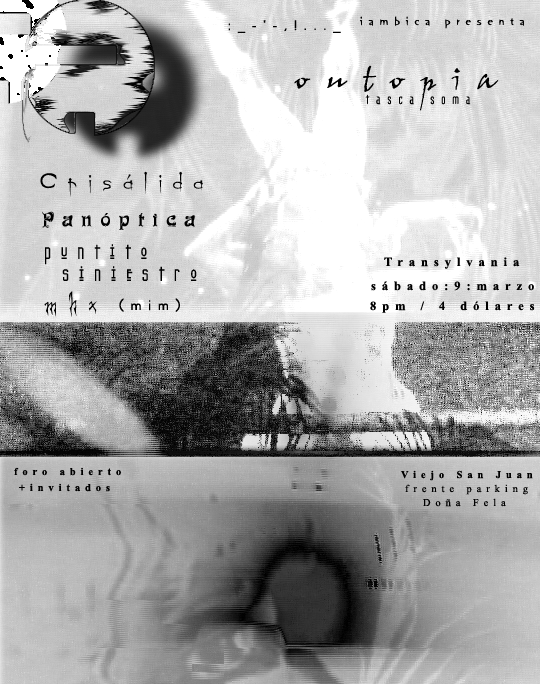
<style>
.page{position:relative;width:540px;height:684px}
.page>*{position:absolute;margin:0}
.t1{font:12px "OrangeLetPlain";letter-spacing:0.475em;color:#000000}
.t2{font:14.6px "OdessaLetPlain";letter-spacing:0.475em;color:#000000}
.t3{font:33.3px "JohnHandyLetPlain";letter-spacing:0.475em;color:#000000}
.t4{font:14.6px "Gothikka";letter-spacing:0.475em;color:#000000}
.t5{font:24px "Ogilvie";letter-spacing:0.475em;color:#000000}
.t6{font:18px "Funk-Regular";letter-spacing:0.475em;color:#000000}
.t7{font:22px "Kashmir";letter-spacing:0.475em;color:#000000}
.t8{font:12.5px "TimesNewRomanPS-BoldMT";letter-spacing:0.475em;color:#000000}
.t9{font:26px "Creepygirl";letter-spacing:0.475em;color:#000000}
.t10{font:10.4px "TimesNewRomanPS-BoldMT";letter-spacing:0.475em;color:#000000}
.t11{font:10.4px "TimesNewRomanPSMT";letter-spacing:0.475em;color:#000000}
</style>
<div class="page">
<p class="t1" style="left:360px;top:16px;width:164px;height:13px">iambica presenta</p>
<p class="t2" style="left:228px;top:20px;width:113px;height:13px">:_-'-,!..._</p>
<p class="t3" style="left:294px;top:65px;width:205px;height:46px">outopia</p>
<p class="t4" style="left:365px;top:94px;width:106px;height:11px">tasca soma</p>
<p class="t5" style="left:40px;top:171px;width:163px;height:26px">Crisálida</p>
<p class="t6" style="left:42px;top:211px;width:153px;height:19px">Panóptica</p>
<p class="t7" style="left:45px;top:244px;width:102px;height:21px">puntito</p>
<p class="t8" style="left:384px;top:257px;width:136px;height:12px">Transylvania</p>
<p class="t7" style="left:62px;top:266px;width:135px;height:15px">siniestro</p>
<p class="t8" style="left:371px;top:281px;width:163px;height:10px">sábado:9:marzo</p>
<p class="t2" style="left:44px;top:291px;width:136px;height:26px"><span class="t9">mhx</span> (mim)</p>
<p class="t8" style="left:370px;top:301px;width:165px;height:12px">8pm / 4 dólares</p>
<p class="t10" style="left:14px;top:467px;width:107px;height:9px">foro abierto</p>
<p class="t10" style="left:401px;top:470px;width:132px;height:11px">Viejo San Juan</p>
<p class="t10" style="left:19px;top:483px;width:91px;height:9px">+invitados</p>
<p class="t11" style="left:405px;top:484px;width:123px;height:11px">frente parking</p>
<p class="t11" style="left:423px;top:498px;width:83px;height:9px">Doña Fela</p>
</div>
